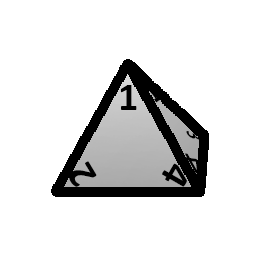
<style>
.page{position:relative;width:256px;height:256px;background:#ffffff}
.page>*{position:absolute;margin:0}
.t1{font:40px "Calibri-Bold";color:#000000}
.t2{font:22.7px "Calibri-Bold";color:#000000;scale:0.72 1}
</style>
<div class="page">
<p class="t1" style="left:120px;top:85px;width:17px;height:25px">1</p>
<p class="t2" style="left:186px;top:131px;width:16px;height:9px;rotate:67deg">3</p>
<p class="t1" style="left:69px;top:161px;width:28px;height:26px;rotate:-121deg">2</p>
<p class="t1" style="left:162px;top:163px;width:25px;height:24px;rotate:120deg">4</p>
</div>
